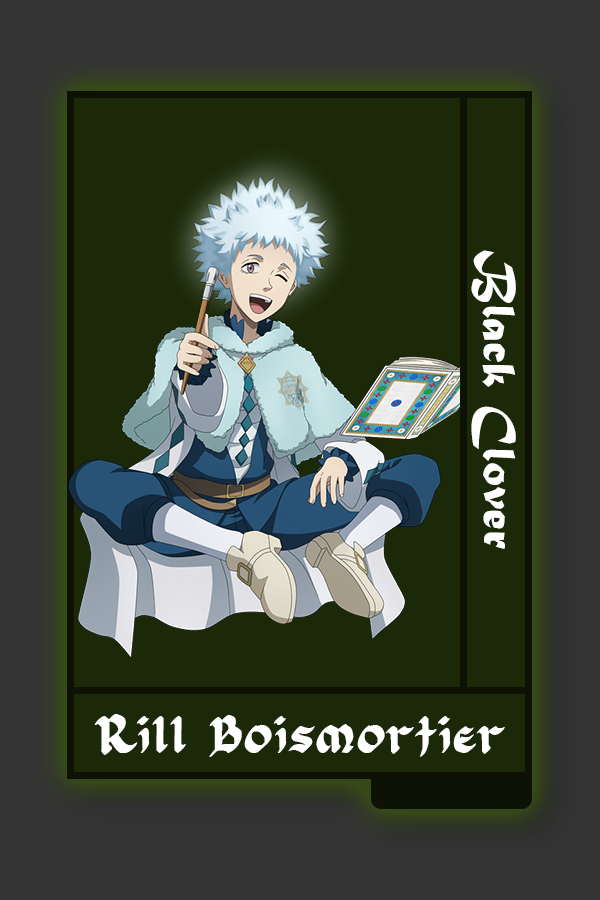
<style>
.page{position:relative;width:600px;height:900px;background:#1b2908}
.page>*{position:absolute;margin:0}
.t1{font:48.8px "MaturaMTScriptCapitals";color:#ffffff}
.t2{font:44.9px "FloranteatLaura";color:#ffffff}
</style>
<div class="page">
<p class="t1" style="left:471px;top:250px;width:45px;height:299px;rotate:90deg">Black Clover</p>
<p class="t2" style="left:94px;top:714px;width:411px;height:43px">Rill Boismortier</p>
</div>
